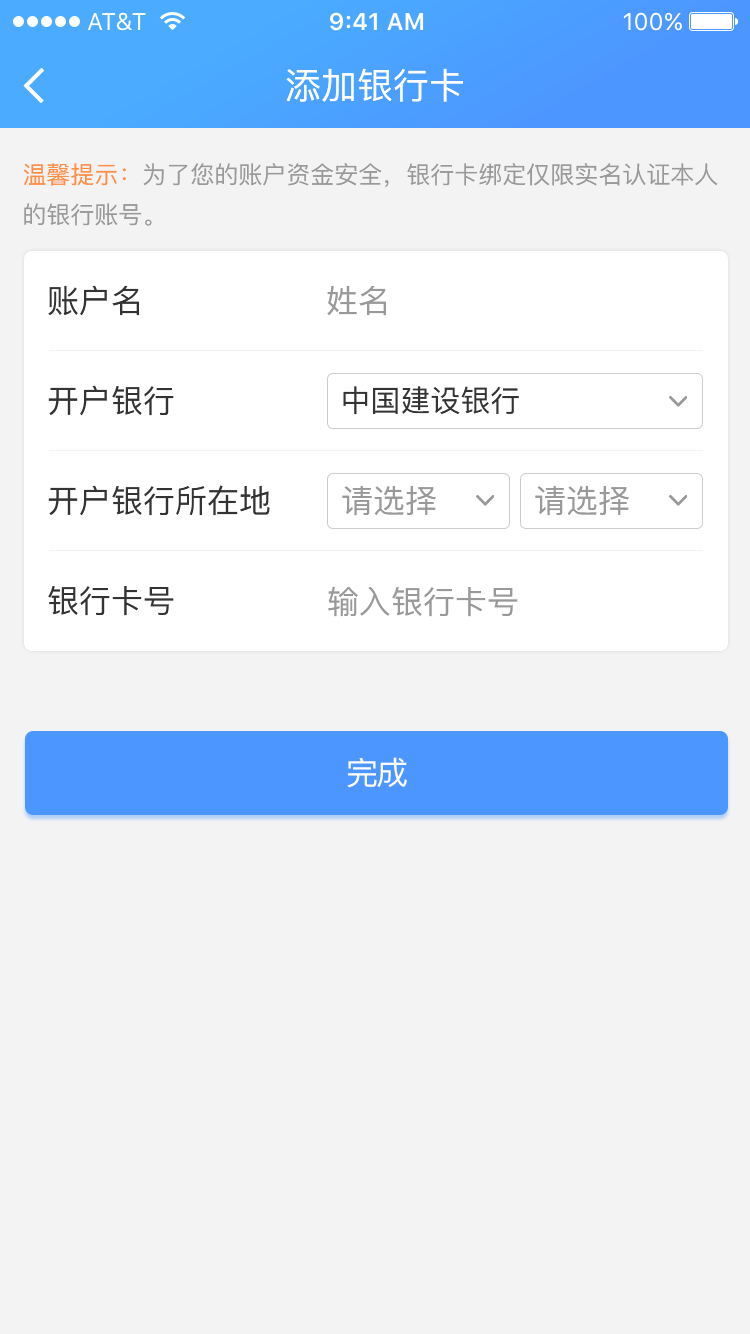
<style>
.page{position:relative;width:750px;height:1334px;background:#f3f3f3}
.page>*{position:absolute;margin:0}
.t1{font:36px "PingFang-SC-Medium";color:#ffffff}
.t2{font:24px/40px "PingFang-SC-Medium";color:#999999}
.t3{font:24px/40px "PingFang-SC-Medium";color:#ff8e42}
.t4{font:32px "PingFang-SC-Medium";color:#333333}
.t5{font:32px "PingFang-SC-Medium";color:#999999}
.t6{font:30px "PingFang-SC-Medium";color:#333333}
.t7{font:32px "PingFang-SC-Medium";letter-spacing:-0.06em;color:#ffffff}
</style>
<div class="page">
<p class="t1" style="left:286px;top:68px;width:177px;height:34px">添加银行卡</p>
<p class="t2" style="left:23px;top:163px;width:695px;height:63px"><span class="t3">温馨提示：</span>为了您的账户资金安全，银行卡绑定仅限实名认证本人<br>的银行账号。</p>
<p class="t4" style="left:48px;top:285px;width:91px;height:31px">账户名</p>
<p class="t5" style="left:327px;top:285px;width:59px;height:31px">姓名</p>
<p class="t4" style="left:48px;top:385px;width:126px;height:31px">开户银行</p>
<p class="t6" style="left:343px;top:386px;width:176px;height:29px">中国建设银行</p>
<p class="t4" style="left:48px;top:485px;width:222px;height:31px">开户银行所在地</p>
<p class="t5" style="left:342px;top:485px;width:94px;height:31px">请选择</p>
<p class="t5" style="left:535px;top:485px;width:94px;height:31px">请选择</p>
<p class="t4" style="left:48px;top:586px;width:126px;height:30px">银行卡号</p>
<p class="t5" style="left:328px;top:586px;width:190px;height:31px">输入银行卡号</p>
<p class="t7" style="left:347px;top:757px;width:60px;height:31px">完成</p>
</div>
